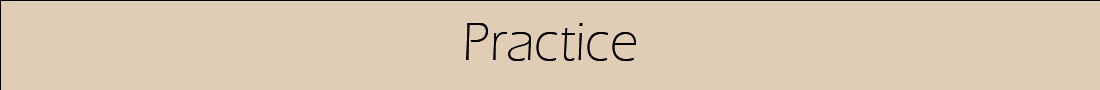
<style>
.page{position:relative;width:1100px;height:90px;background:#dfcdb5}
.page>*{position:absolute;margin:0}
.t1{font:55px "ErasITC-Light";color:#000000}
</style>
<div class="page">
<p class="t1" style="left:466px;top:23px;width:170px;height:38px">Practice</p>
</div>
